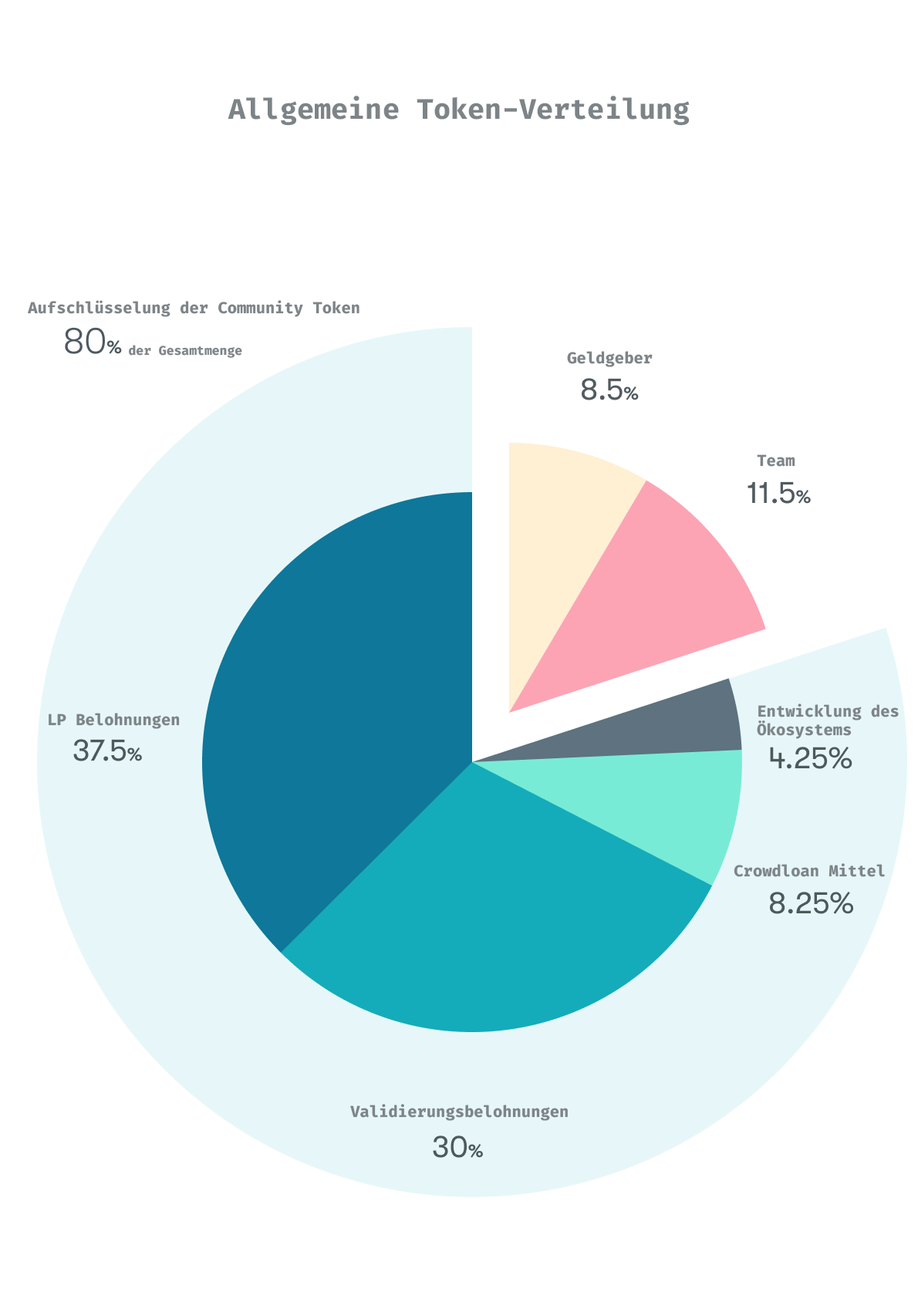
<style>
.page{position:relative;width:918px;height:1299px;background:#ffffff}
.page>*{position:absolute;margin:0}
.t1{font:27.8px "FiraCode-Bold";color:#7d8488}
.t2{font:15.4px "FiraCode-Bold";color:#7d8488}
.t3{font:12.3px "FiraCode-Bold";color:#7d8488}
</style>
<div class="page">
<p class="t1" style="left:228px;top:96px;width:462px;height:30px">Allgemeine Token-Verteilung</p>
<p class="t2" style="left:28px;top:300px;width:331px;height:17px">Aufschlüsselung der Community Token</p>
<p class="t3" style="left:129px;top:345px;width:113px;height:13px">der Gesamtmenge</p>
<p class="t2" style="left:567px;top:351px;width:86px;height:16px">Geldgeber</p>
<p class="t2" style="left:757px;top:454px;width:38px;height:13px">Team</p>
<p class="t2" style="left:49px;top:713px;width:131px;height:16px">LP Belohnungen</p>
<p class="t2" style="left:757px;top:704px;width:142px;height:35px">Entwicklung des <br>Ökosystems</p>
<p class="t2" style="left:734px;top:863px;width:151px;height:14px">Crowdloan Mittel</p>
<p class="t2" style="left:350px;top:1104px;width:218px;height:17px">Validierungsbelohnungen</p>
</div>
